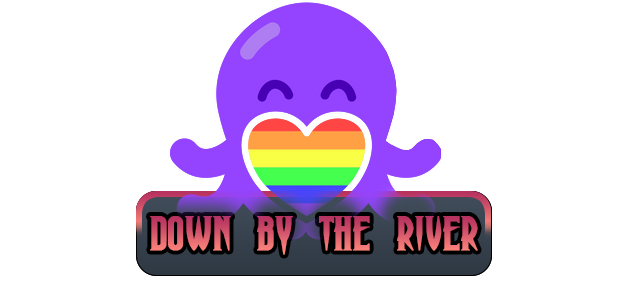
<style>
.page{position:relative;width:640px;height:290px;background:#ffffff}
.page>*{position:absolute;margin:0}
.t1{font:48px "HauntingAttraction";font-weight:bold}
</style>
<div class="page">
<p class="t1" style="left:150px;top:216px;width:328px;height:39px">Down by the river</p>
</div>
